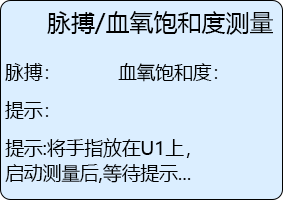
<style>
.page{position:relative;width:283px;height:200px;background:#dbeeff}
.page>*{position:absolute;margin:0}
.t1{font:24px "MicrosoftYaHei";color:#000000;font-variant:small-caps}
.t2{font:18.7px "MicrosoftYaHei";color:#000000;font-variant:small-caps}
</style>
<div class="page">
<p class="t1" style="left:47px;top:11px;width:226px;height:24px">脉搏/血氧饱和度测量</p>
<p class="t2" style="left:5px;top:63px;width:44px;height:18px">脉搏：</p>
<p class="t2" style="left:118px;top:63px;width:100px;height:19px">血氧饱和度：</p>
<p class="t2" style="left:5px;top:101px;width:44px;height:18px">提示：</p>
<p class="t2" style="left:5px;top:138px;width:185px;height:20px">提示:将手指放在U1上，</p>
<p class="t2" style="left:5px;top:164px;width:186px;height:19px">启动测量后,等待提示...</p>
</div>
